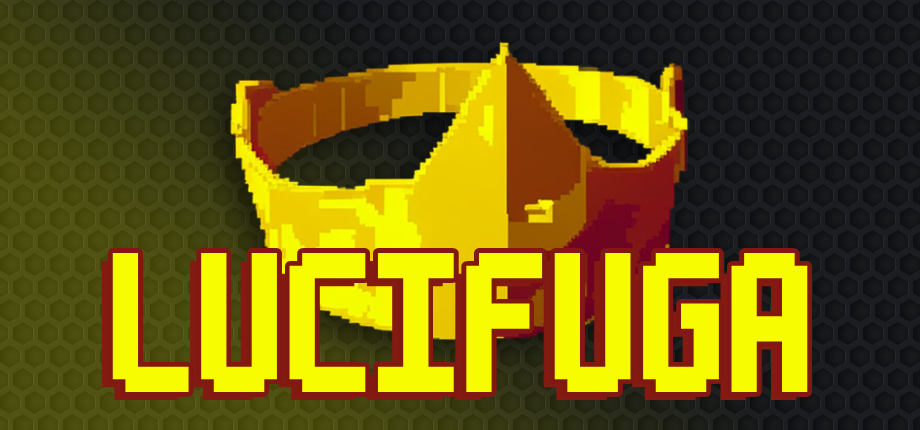
<style>
.page{position:relative;width:920px;height:430px}
.page>*{position:absolute;margin:0}
.t1{font:202px "m6x11";color:#f7fc01;text-transform:uppercase}
</style>
<div class="page">
<p class="t1" style="left:112px;top:253px;width:696px;height:139px">Lucifuga</p>
</div>
